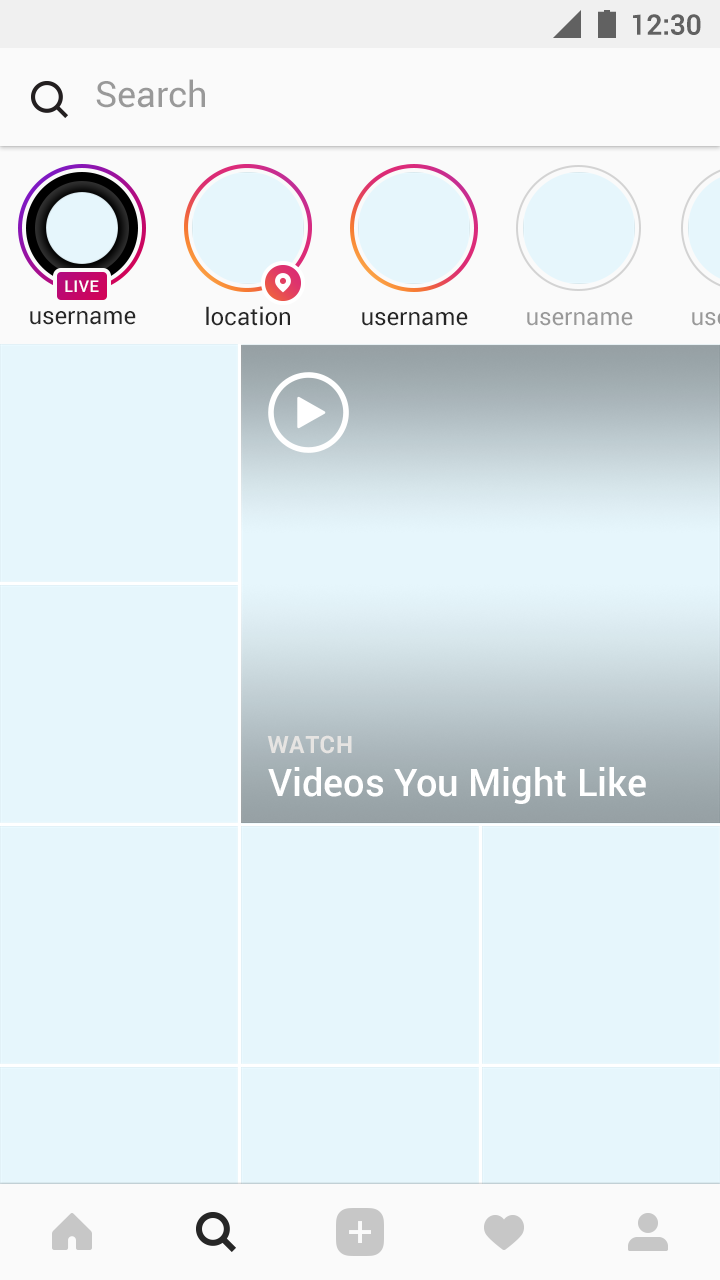
<style>
.page{position:relative;width:720px;height:1280px;background:#e6f6fc}
.page>*{position:absolute;margin:0}
.t1{font:28px "Roboto-Medium";color:#616161}
.t2{font:36px "Roboto-Regular";color:#999999}
.t3{font:16px "Roboto-Medium";letter-spacing:0.042em;color:#ffffff}
.t4{font:24px "Roboto-Regular";color:#262626}
.t5{font:24px "Roboto-Regular";color:#999999}
.t6{font:24px "Roboto-Bold";letter-spacing:0.04em;color:#e6e4e2;text-transform:uppercase}
.t7{font:38px "Roboto-Medium";color:#ffffff}
</style>
<div class="page">
<p class="t1" style="left:633px;top:14px;width:68px;height:21px">12:30</p>
<p class="t2" style="left:96px;top:79px;width:109px;height:29px">Search</p>
<p class="t3" style="left:65px;top:280px;width:34px;height:12px">LIVE</p>
<p class="t4" style="left:30px;top:311px;width:106px;height:14px">username</p>
<p class="t4" style="left:206px;top:306px;width:84px;height:20px">location</p>
<p class="t4" style="left:362px;top:312px;width:106px;height:14px">username</p>
<p class="t5" style="left:527px;top:312px;width:106px;height:14px">username</p>
<p class="t6" style="left:267px;top:735px;width:85px;height:19px">Watch</p>
<p class="t7" style="left:268px;top:767px;width:378px;height:37px">Videos You Might Like</p>
</div>
